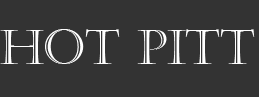
<style>
.page{position:relative;width:259px;height:97px;background:#333333}
.page>*{position:absolute;margin:0}
.t1{font:48px "Castellar";color:#ffffff}
</style>
<div class="page">
<p class="t1" style="left:0px;top:29px;width:255px;height:35px">HOT PITT</p>
</div>
